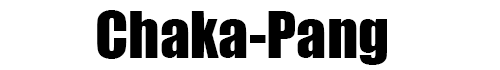
<style>
.page{position:relative;width:500px;height:70px;background:#ffffff}
.page>*{position:absolute;margin:0}
.t1{font:60px "Impact";color:#000000}
</style>
<div class="page">
<p class="t1" style="left:97px;top:10px;width:290px;height:55px">Chaka-Pang</p>
</div>
